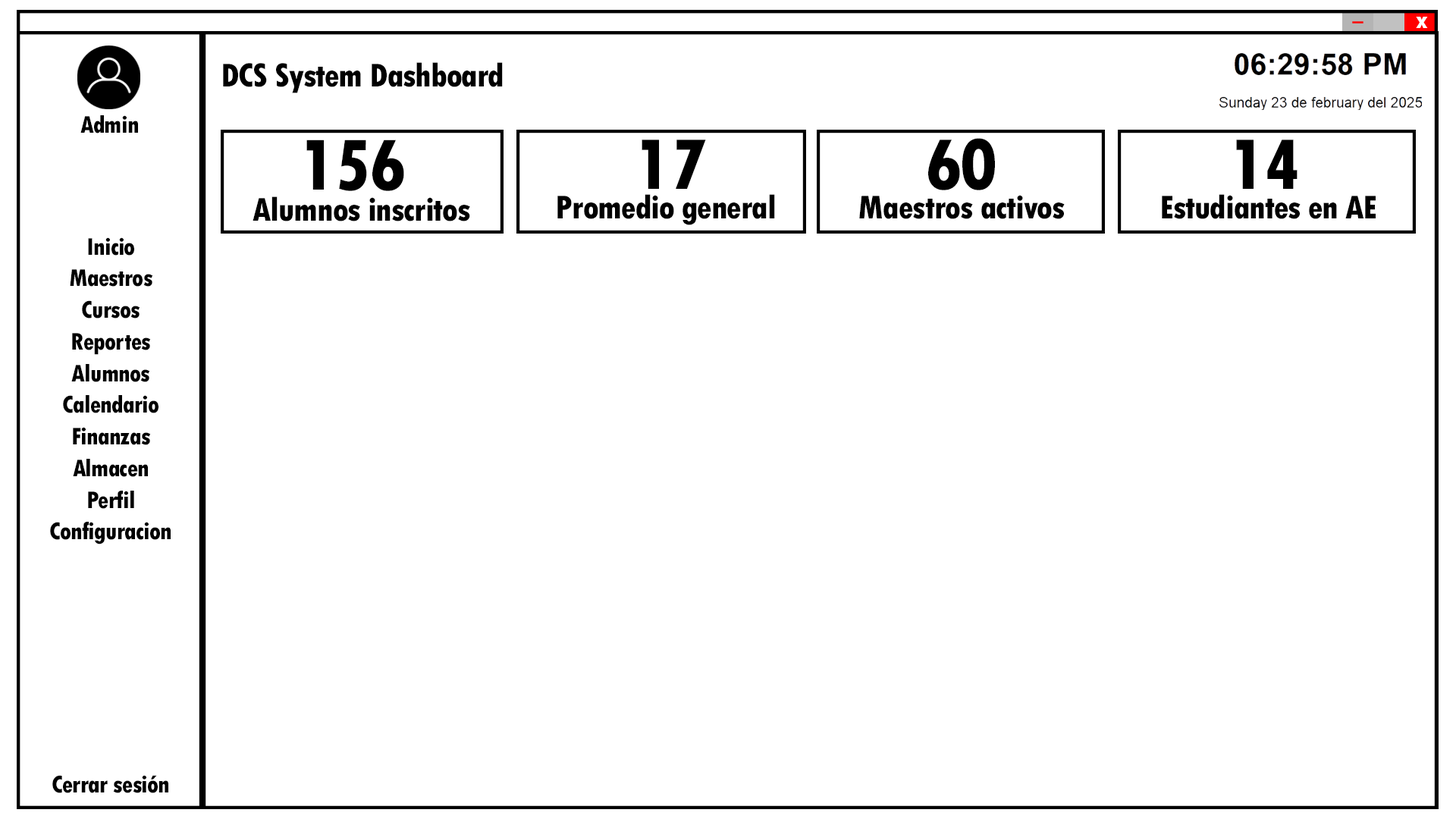
<style>
.page{position:relative;width:1456px;height:819px;background:#ffffff}
.page>*{position:absolute;margin:0}
.t1{font:25.3px "TwCenMT-CondensedExtraBold";letter-spacing:-0.025em;color:#ffffff}
.t2{font:34.8px "TwCenMT-CondensedExtraBold";letter-spacing:-0.025em;color:#000000}
.t3{font:25.4px "TwCenMT-CondensedExtraBold";letter-spacing:-0.025em;color:#000000}
.t4{font:75.8px "TwCenMT-CondensedExtraBold";letter-spacing:-0.025em;color:#000000}
.t5{font:75.5px "TwCenMT-CondensedExtraBold";letter-spacing:-0.025em;color:#000000}
.t6{font:25.3px/15.8px "TwCenMT-CondensedExtraBold";letter-spacing:-0.025em;color:#000000}
</style>
<div class="page">
<p class="t1" style="left:1416px;top:17px;width:12px;height:11px">x</p>
<p class="t2" style="left:223px;top:62px;width:280px;height:31px">DCS System Dashboard</p>
<p class="t3" style="left:80px;top:115px;width:58px;height:18px">Admin</p>
<p class="t4" style="left:306px;top:140px;width:98px;height:51px">156</p>
<p class="t5" style="left:642px;top:140px;width:64px;height:49px">17</p>
<p class="t5" style="left:928px;top:138px;width:67px;height:52px">60</p>
<p class="t5" style="left:1236px;top:140px;width:61px;height:49px">14</p>
<p class="t2" style="left:253px;top:196px;width:217px;height:25px">Alumnos inscritos</p>
<p class="t2" style="left:557px;top:194px;width:218px;height:31px">Promedio general</p>
<p class="t2" style="left:859px;top:195px;width:206px;height:24px">Maestros activos</p>
<p class="t2" style="left:1162px;top:194px;width:214px;height:25px">Estudiantes en AE</p>
<p class="t6" style="left:50px;top:237px;width:121px;height:556px;text-align:center">Inicio<br><br>Maestros<br><br>Cursos<br><br>Reportes<br><br>Alumnos<br><br>Calendario<br><br>Finanzas<br><br>Almacen<br><br>Perfil<br><br>Configuracion<br><br><br><br><br><br><br><br><br><br><br><br><br><br><br><br>Cerrar sesión</p>
</div>
